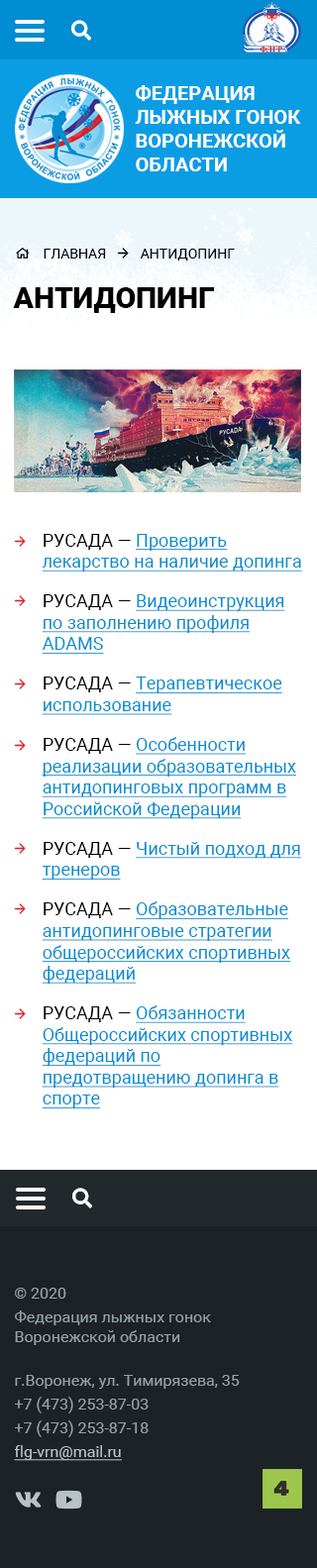
<style>
.page{position:relative;width:317px;height:1568px;background:#ffffff}
.page>*{position:absolute;margin:0}
.t1{font:19.8px "Roboto-Bold";color:#ffffff;text-transform:uppercase}
.t2{font:13.9px "Roboto-Regular";color:#000000;text-transform:uppercase}
.t3{font:29.7px "Roboto-Black";color:#000000;text-transform:uppercase}
.t4{font:17.8px "Roboto-Regular";color:#008dd2;text-decoration:underline}
.t5{font:17.8px/39.6px "Roboto-Regular";color:#000000}
.t6{font:17.8px/39.6px "Roboto-Regular";color:#008dd2;text-decoration:underline}
.t7{font:15.8px/23.8px "Roboto-Regular";color:#94a1a9}
.t8{font:15.8px/19.8px "Roboto-Regular";color:#94a1a9}
.t9{font:15.8px/23.8px "Roboto-Regular";color:#b7c1c7;text-decoration:underline}
</style>
<div class="page">
<p class="t1" style="left:135px;top:85px;width:166px;height:86px">ФЕДЕРАЦИЯ <br>ЛЫЖНЫХ ГОНОК<br>воронежской <br>области</p>
<p class="t2" style="left:44px;top:249px;width:191px;height:12px">Главная          Антидопинг</p>
<p class="t3" style="left:13px;top:287px;width:201px;height:26px">Антидопинг</p>
<p class="t4" style="left:42px;top:534px;width:260px;height:575px"><span class="t5">РУСАДА — </span><span class="t6">Проверить </span>лекарство на наличие допинга<br><span class="t5">РУСАДА — </span><span class="t6">Видеоинструкция </span>по заполнению профиля ADAMS<br><span class="t5">РУСАДА — </span><span class="t6">Терапевтическое </span>использование<br><span class="t5">РУСАДА — </span><span class="t6">Особенности </span>реализации образовательных антидопинговых программ в Российской Федерации<br><span class="t5">РУСАДА — </span><span class="t6">Чистый подход для </span>тренеров<br><span class="t5">РУСАДА — </span><span class="t6">Образовательные </span>антидопинговые стратегии общероссийских спортивных федераций<br><span class="t5">РУСАДА — </span><span class="t6">Обязанности </span>Общероссийских спортивных федераций по предотвращению допинга в спорте</p>
<p class="t7" style="left:15px;top:1288px;width:196px;height:57px">© 2020 <br>Федерация лыжных гонок <br><span class="t8">Воронежской области</span></p>
<p class="t7" style="left:14px;top:1375px;width:226px;height:86px">г.Воронеж, ул. Тимирязева, 35<br>+7 (473) 253-87-03<br>+7 (473) 253-87-18<br><span class="t9">flg-vrn@mail.ru</span></p>
</div>
